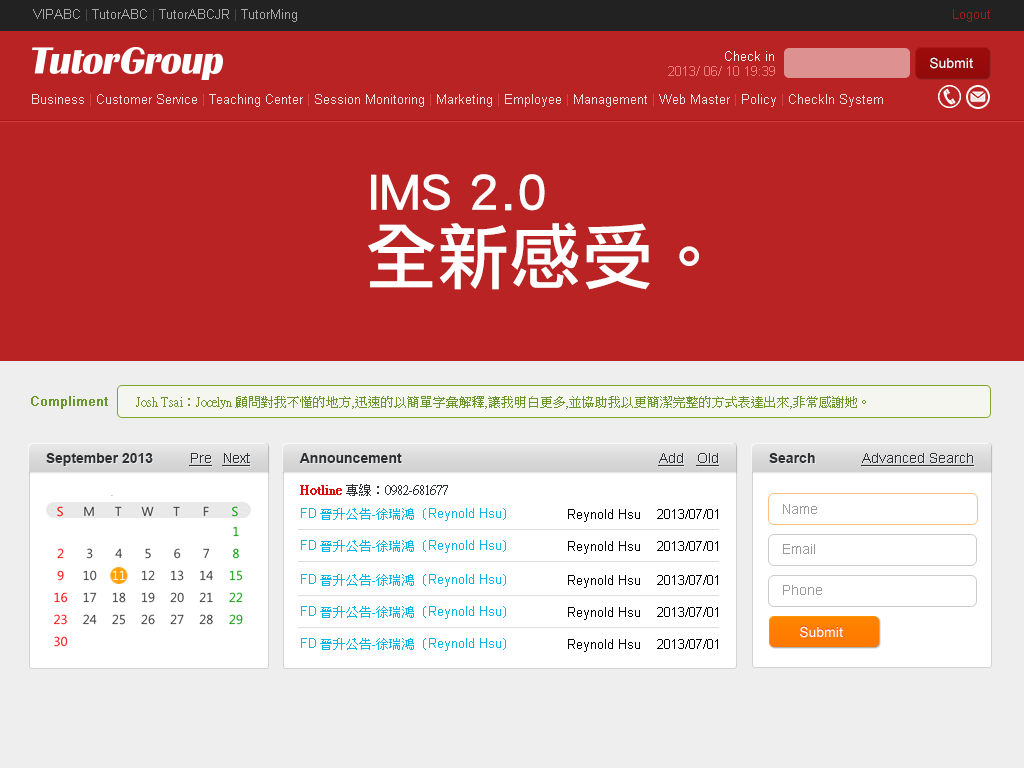
<style>
.page{position:relative;width:1024px;height:768px;background:#ba2323}
.page>*{position:absolute;margin:0}
.t1{font:13px "ArialMT";color:#a9a9a9}
.t2{font:13px "ArialMT";color:#961e1e}
.t3{font:13px "ArialMT";color:#ffffff}
.t4{font:14px "ArialMT";color:#ffffff}
.t5{font:13px "ArialMT";color:#f08080}
.t6{font:13px "ArialMT";color:#f2dfdf}
.t7{font:48px/72px "LiHeiPro";color:#ffffff}
.t8{font:72px/72px "LiHeiPro";color:#ffffff}
.t9{font:13px "ArialMT";color:#6a962c;font-weight:bold}
.t10{font:13px "PMingLiU";color:#6a962c}
.t11{font:14px "Arial-BoldMT";color:#2c2f32}
.t12{font:14px "ArialMT";color:#2c2f32;text-decoration:underline}
.t13{font:13px "PMingLiU";color:#2c2f32}
.t14{font:13px "PMingLiU";color:#dd0b0b;font-weight:bold}
.t15{font:13px "ArialMT";color:#07b6e2}
.t16{font:13px "PMingLiU";color:#07b6e2}
.t17{font:13px "ArialMT";color:#000000}
.t18{font:14px "ArialMT";color:#999999}
</style>
<div class="page">
<p class="t1" style="left:33px;top:9px;width:264px;height:13px">VIPABC | TutorABC | TutorABCJR | TutorMing</p>
<p class="t2" style="left:953px;top:9px;width:37px;height:13px">Logout</p>
<p class="t3" style="left:725px;top:51px;width:49px;height:10px">Check in</p>
<p class="t4" style="left:930px;top:57px;width:43px;height:12px">Submit</p>
<p class="t5" style="left:668px;top:66px;width:107px;height:10px">2013/ 06/ 10 19:39</p>
<p class="t6" style="left:32px;top:94px;width:851px;height:13px">Business | Customer Service | Teaching Center | Session Monitoring | Marketing | Employee | Management | Web Master | Policy | CheckIn System</p>
<p class="t7" style="left:368px;top:174px;width:331px;height:116px;text-align:center">IMS 2.0           <br><span class="t8">全新感受。</span></p>
<p class="t9" style="left:31px;top:396px;width:77px;height:13px">Compliment</p>
<p class="t10" style="left:136px;top:396px;width:730px;height:13px">Josh Tsai：Jocelyn 顧問對我不懂的地方,迅速的以簡單字彙解釋,讓我明白更多,並協助我以更簡潔完整的方式表達出來,非常感謝她。</p>
<p class="t11" style="left:46px;top:453px;width:107px;height:13px">September 2013</p>
<p class="t12" style="left:189px;top:453px;width:23px;height:13px">Pre</p>
<p class="t12" style="left:222px;top:453px;width:28px;height:13px">Next</p>
<p class="t11" style="left:299px;top:453px;width:103px;height:10px">Announcement</p>
<p class="t12" style="left:658px;top:453px;width:26px;height:13px">Add</p>
<p class="t12" style="left:696px;top:453px;width:23px;height:13px">Old</p>
<p class="t11" style="left:769px;top:453px;width:46px;height:10px">Search</p>
<p class="t12" style="left:861px;top:453px;width:113px;height:13px">Advanced Search</p>
<p class="t13" style="left:300px;top:484px;width:148px;height:12px"><span class="t14">Hotline </span>專線：0982-681677</p>
<p class="t15" style="left:301px;top:508px;width:205px;height:13px">FD<span class="t16"> 晉升公告-徐瑞鴻（</span>Reynold Hsu<span class="t16">）</span></p>
<p class="t17" style="left:568px;top:509px;width:150px;height:13px">Reynold Hsu    2013/07/01</p>
<p class="t18" style="left:783px;top:504px;width:34px;height:10px">Name</p>
<p class="t15" style="left:301px;top:540px;width:205px;height:13px">FD<span class="t16"> 晉升公告-徐瑞鴻（</span>Reynold Hsu<span class="t16">）</span></p>
<p class="t17" style="left:568px;top:541px;width:150px;height:13px">Reynold Hsu    2013/07/01</p>
<p class="t18" style="left:783px;top:544px;width:32px;height:10px">Email</p>
<p class="t15" style="left:301px;top:574px;width:205px;height:13px">FD<span class="t16"> 晉升公告-徐瑞鴻（</span>Reynold Hsu<span class="t16">）</span></p>
<p class="t17" style="left:568px;top:575px;width:150px;height:13px">Reynold Hsu    2013/07/01</p>
<p class="t18" style="left:783px;top:585px;width:39px;height:10px">Phone</p>
<p class="t15" style="left:301px;top:606px;width:205px;height:13px">FD<span class="t16"> 晉升公告-徐瑞鴻（</span>Reynold Hsu<span class="t16">）</span></p>
<p class="t17" style="left:568px;top:607px;width:150px;height:13px">Reynold Hsu    2013/07/01</p>
<p class="t4" style="left:800px;top:626px;width:43px;height:12px">Submit</p>
<p class="t15" style="left:301px;top:638px;width:205px;height:13px">FD<span class="t16"> 晉升公告-徐瑞鴻（</span>Reynold Hsu<span class="t16">）</span></p>
<p class="t17" style="left:568px;top:639px;width:150px;height:13px">Reynold Hsu    2013/07/01</p>
</div>
